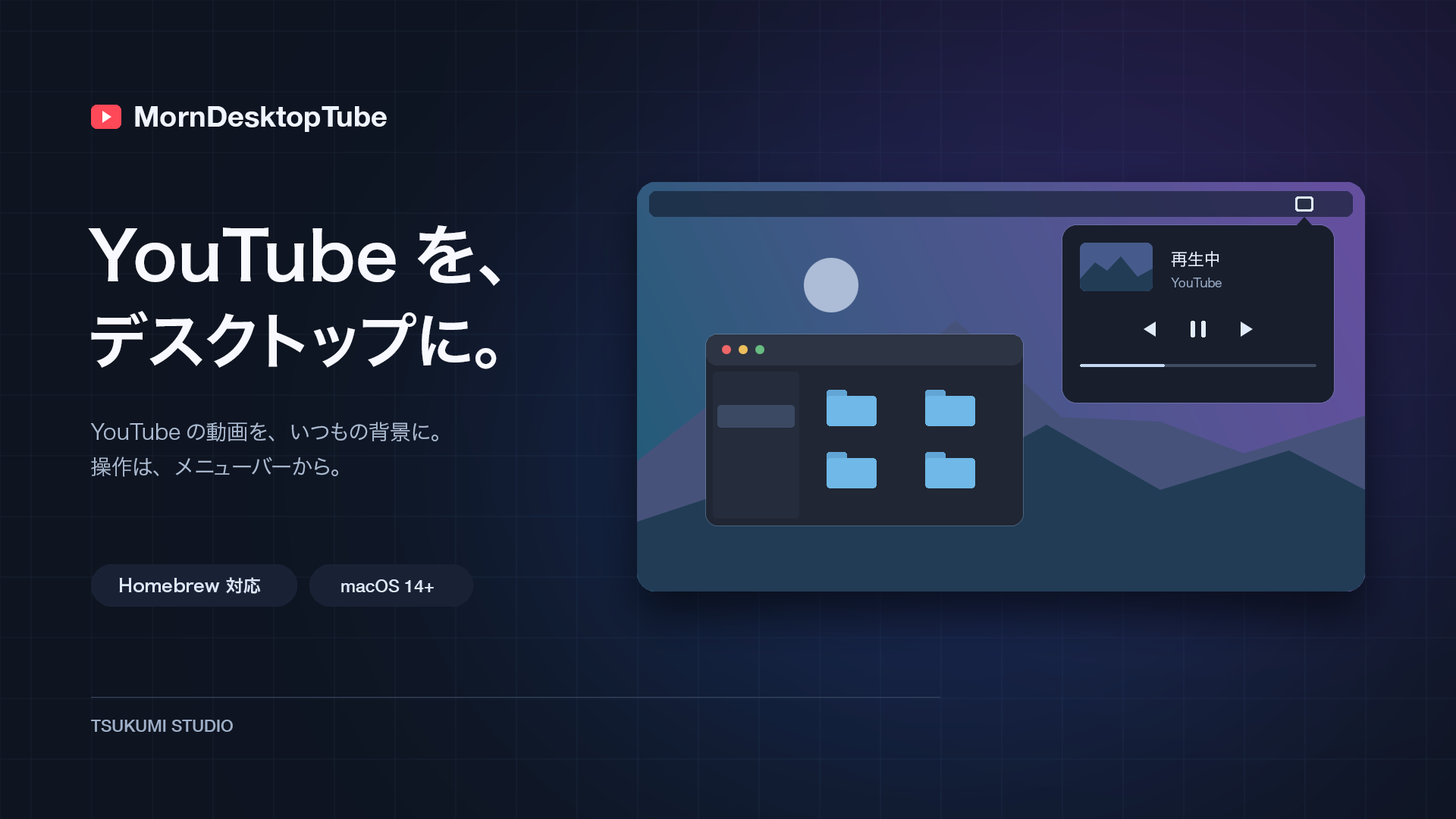
<style>
.page{position:relative;width:1456px;height:819px}
.page>*{position:absolute;margin:0}
.t1{font:28.8px "HelveticaNeue-Bold";color:#eff4ff}
.t2{font:66.7px "HiraginoSans-W6";color:#f7f9ff}
.t3{font:16.7px "HiraginoSans-W3";color:#e7eefb}
.t4{font:12.1px "HiraginoSans-W3";color:#97a9c4}
.t5{font:60.7px "HiraginoSans-W6";color:#f7f9ff}
.t6{font:21.2px "HiraginoSans-W3";color:#abbbd2}
.t7{font:17.4px "HiraginoSans-W6";color:#dce8fa}
.t8{font:17.4px "HelveticaNeue-Medium";color:#dce8fa}
.t9{font:16.7px "HelveticaNeue-Medium";color:#9fb0c9}
</style>
<div class="page">
<p class="t1" style="left:135px;top:106px;width:252px;height:26px">MornDesktopTube</p>
<p class="t2" style="left:88px;top:225px;width:412px;height:61px">YouTubeを、</p>
<p class="t3" style="left:1171px;top:251px;width:48px;height:16px">再生中</p>
<p class="t4" style="left:1171px;top:278px;width:51px;height:9px">YouTube</p>
<p class="t5" style="left:91px;top:311px;width:406px;height:58px">デスクトップに。</p>
<p class="t6" style="left:90px;top:422px;width:348px;height:20px">YouTubeの動画を、いつもの背景に。</p>
<p class="t6" style="left:91px;top:457px;width:247px;height:20px">操作は、メニューバーから。</p>
<p class="t7" style="left:119px;top:577px;width:142px;height:17px">Homebrew 対応</p>
<p class="t8" style="left:341px;top:579px;width:93px;height:13px">macOS 14+</p>
<p class="t9" style="left:91px;top:720px;width:142px;height:12px">TSUKUMI STUDIO</p>
</div>
